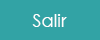
<style>
.page{position:relative;width:100px;height:40px;background:#32a3a5}
.page>*{position:absolute;margin:0}
.t1{font:18px "CenturyGothic";color:#ffffff}
</style>
<div class="page">
<p class="t1" style="left:32px;top:14px;width:35px;height:13px">Salir</p>
</div>
